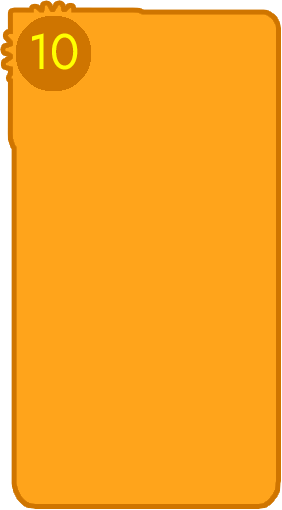
<style>
.page{position:relative;width:282px;height:510px;background:#ffa41b}
.page>*{position:absolute;margin:0}
.t1{font:50px "Jost-Regular";color:#ffff00}
</style>
<div class="page">
<p class="t1" style="left:32px;top:33px;width:46px;height:37px">10</p>
</div>
